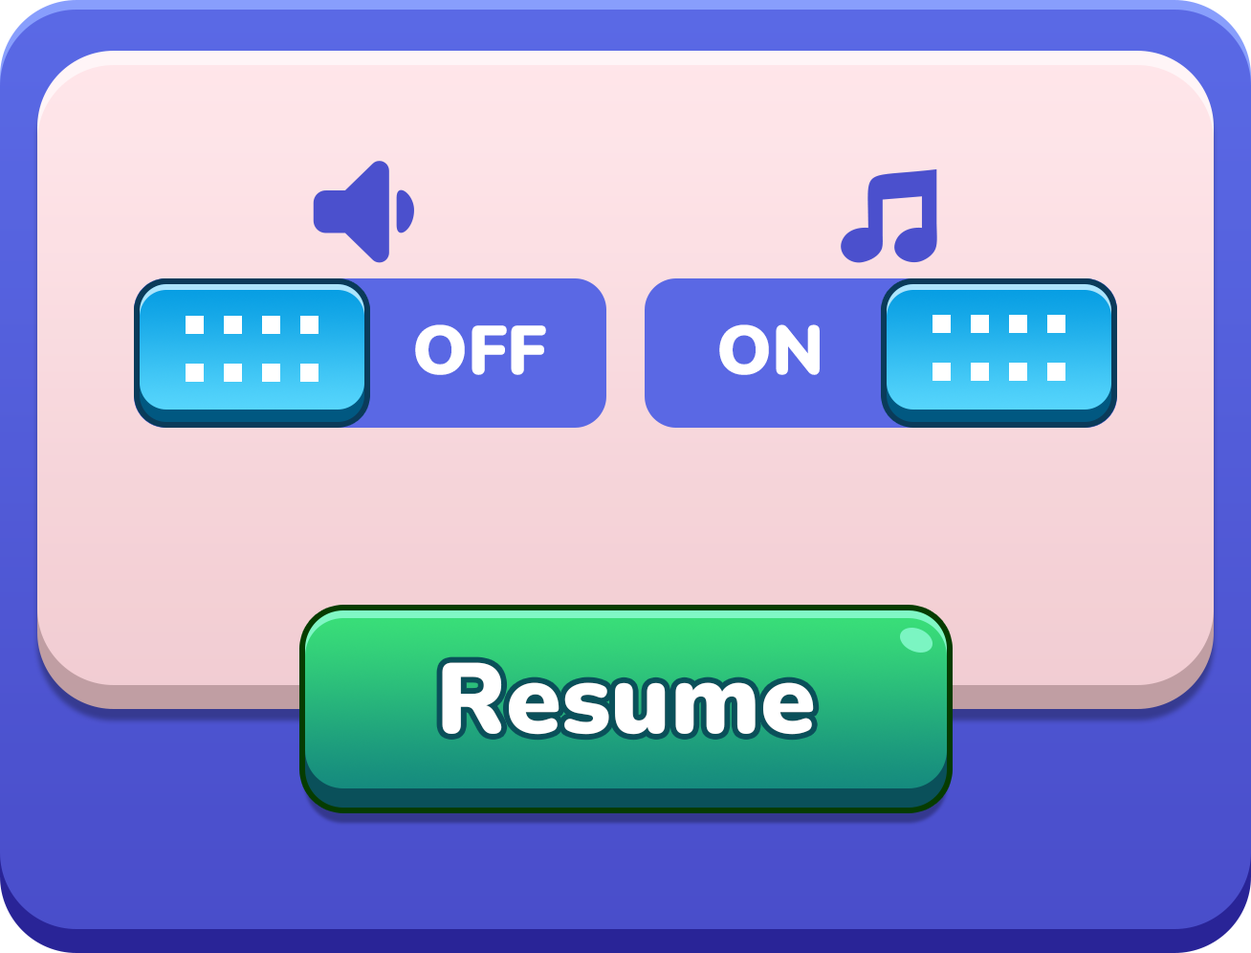
<style>
.page{position:relative;width:1251px;height:953px}
.page>*{position:absolute;margin:0}
.t1{font:68.9px "Nunito-Black";color:#ffffff}
.t2{font:99.5px "Nunito-Black";color:#ffffff}
</style>
<div class="page">
<p class="t1" style="left:415px;top:324px;width:131px;height:51px">OFF</p>
<p class="t1" style="left:719px;top:324px;width:101px;height:51px">ON</p>
<p class="t2" style="left:442px;top:662px;width:372px;height:73px">Resume</p>
</div>
